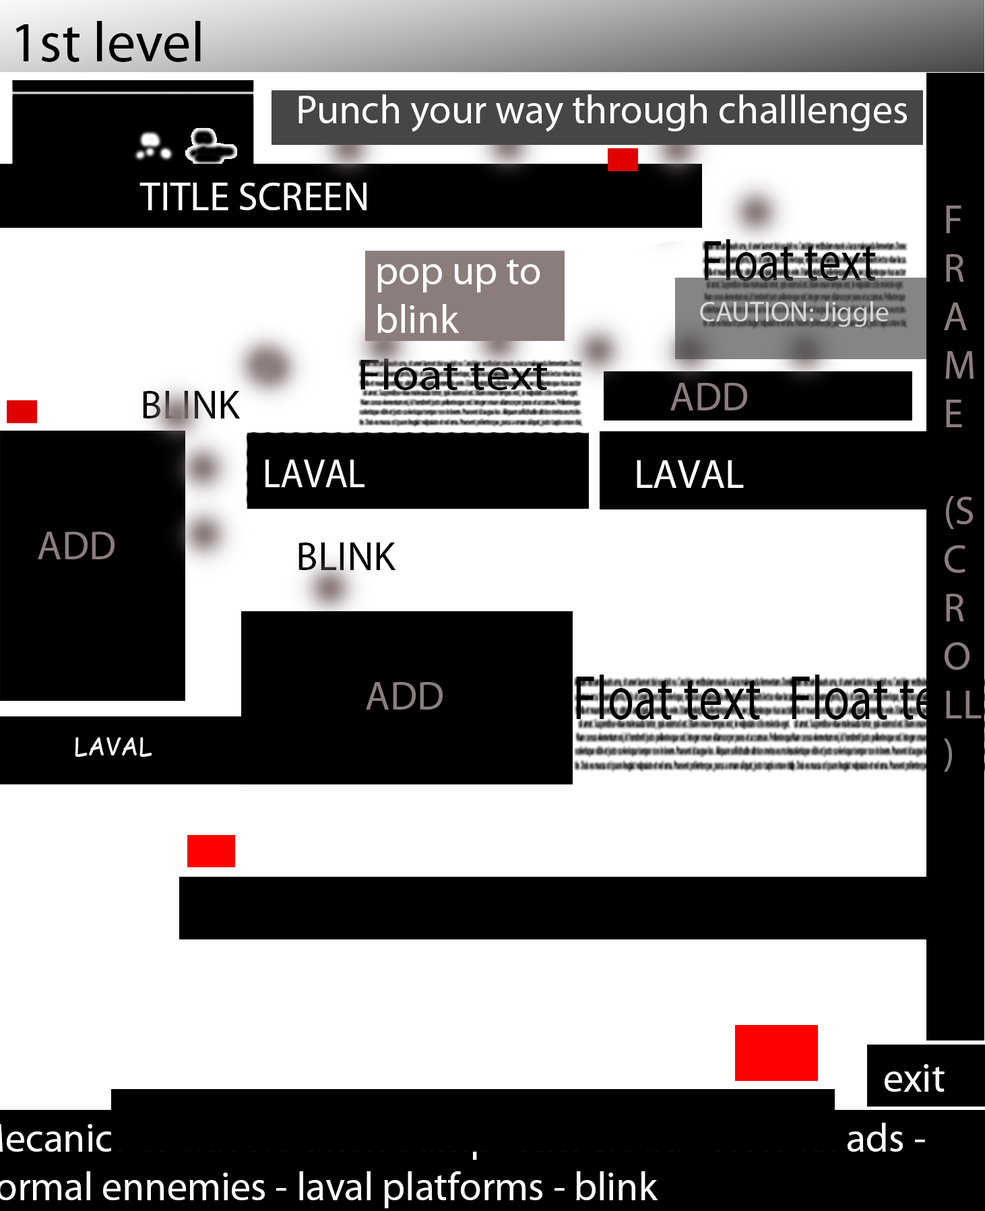
<style>
.page{position:relative;width:985px;height:1211px;background:#ffffff}
.page>*{position:absolute;margin:0}
.t1{font:57.4px "MyriadPro-Regular";color:#000000}
.t2{font:40.4px "MyriadPro-Regular";color:#ffffff}
.t3{font:40.4px "MyriadPro-Regular";color:#8c7d7d}
.t4{font:57.5px "MyriadPro-Regular";color:#000000;scale:0.78 1}
.t5{font:28px "MyriadPro-Regular";color:#d7d7d7}
.t6{font:44px "MyriadPro-Regular";color:#000000;scale:1.11 1}
.t7{font:40.4px "MyriadPro-Regular";color:#000000}
.t8{font:40.4px "MyriadPro-Regular";color:#ffffff;scale:0.93 1}
.t9{font:62.5px "MyriadPro-Regular";color:#000000;scale:0.77 1}
.t10{font:24.3px "ComicSansMS";color:#ffffff}
.t11{font:40.4px "MyriadPro-Regular"}
</style>
<div class="page">
<p class="t1" style="left:15px;top:21px;width:186px;height:41px">1st level</p>
<p class="t2" style="left:298px;top:94px;width:609px;height:38px">Punch your way through challlenges</p>
<p class="t2" style="left:139px;top:183px;width:227px;height:27px">TITLE SCREEN</p>
<p class="t3" style="left:944px;top:205px;width:38px;height:566px">F<br>R<br>A<br>M<br>E<br><br>(SCROLL)</p>
<p class="t4" style="left:705px;top:239px;width:171px;height:42px">Float text</p>
<p class="t2" style="left:377px;top:259px;width:163px;height:74px">pop up to blink</p>
<p class="t5" style="left:700px;top:301px;width:189px;height:26px">CAUTION: Jiggle</p>
<p class="t6" style="left:360px;top:358px;width:187px;height:32px">Float text</p>
<p class="t3" style="left:670px;top:383px;width:77px;height:27px">ADD</p>
<p class="t7" style="left:143px;top:391px;width:98px;height:27px">BLINK</p>
<p class="t8" style="left:265px;top:459px;width:99px;height:28px">LAVAL</p>
<p class="t2" style="left:637px;top:460px;width:107px;height:28px">LAVAL</p>
<p class="t3" style="left:38px;top:532px;width:77px;height:27px">ADD</p>
<p class="t7" style="left:298px;top:542px;width:98px;height:28px">BLINK</p>
<p class="t9" style="left:576px;top:674px;width:184px;height:46px">Float text</p>
<p class="t9" style="left:792px;top:674px;width:184px;height:46px">Float text</p>
<p class="t3" style="left:366px;top:682px;width:77px;height:27px">ADD</p>
<p class="t10" style="left:75px;top:737px;width:77px;height:20px">LAVAL</p>
<p class="t2" style="left:885px;top:1064px;width:60px;height:27px">exit</p>
<p class="t11" style="left:0px;top:1122px;width:925px;height:86px">Mecanics to have: Punch-Jump- text cloud - Normal ads - normal ennemies - laval platforms - blink<br><br>f<br>-</p>
</div>
